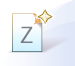
<style>
.page{position:relative;width:75px;height:66px;background:#ffffff}
.page>*{position:absolute;margin:0}
.t1{font:24px "MyriadPro-Regular";color:#7a7e80}
</style>
<div class="page">
<p class="t1" style="left:20px;top:26px;width:13px;height:17px">Z</p>
</div>
